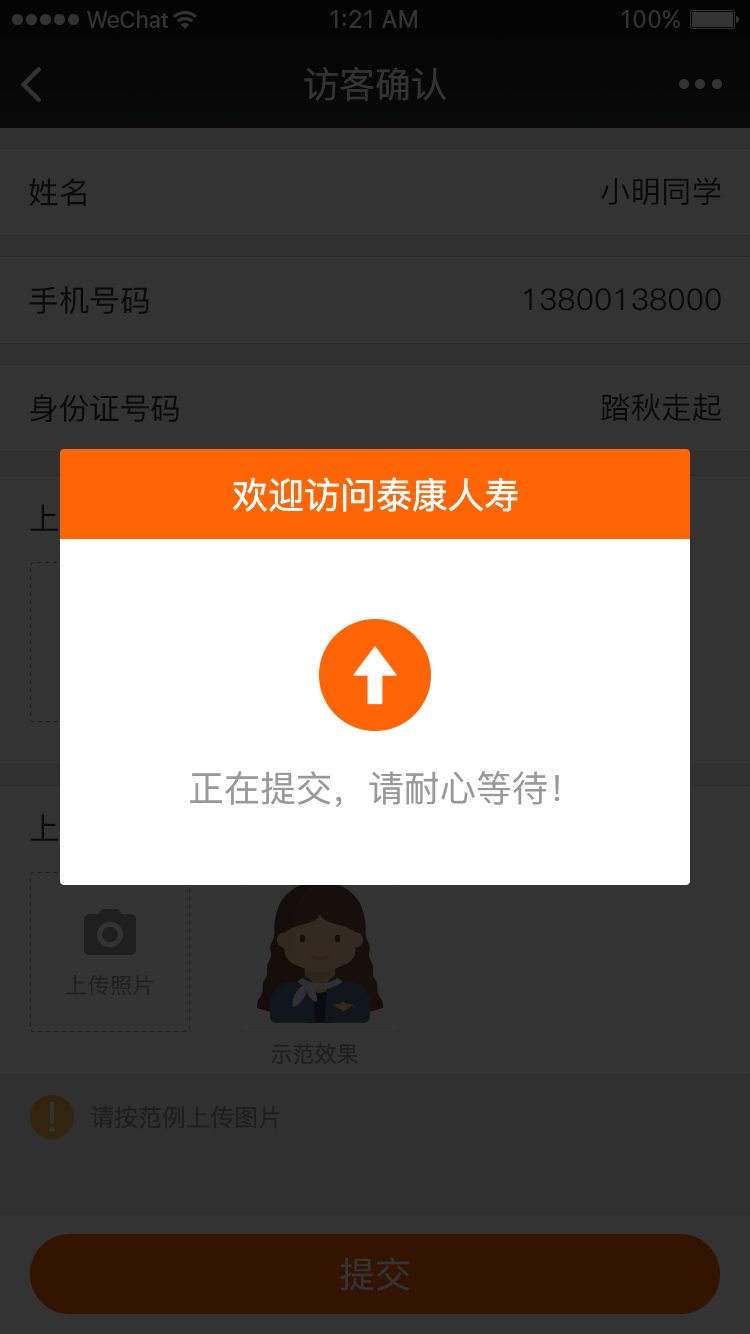
<style>
.page{position:relative;width:750px;height:1334px;background:#333333}
.page>*{position:absolute;margin:0}
.t1{font:36px "PingFang-SC-Medium";color:#333333}
.t2{font:30px "PingFangSC-Regular";color:#0a0a0a}
.t3{font:30px "PingFang-SC-Medium";color:#0a0a0a}
.t4{font:36px "PingFangSC-Regular";color:#ffffff}
.t5{font:36px "PingFang-SC-Medium";color:#999999}
.t6{font:22px "PingFang-SC-Medium";color:#1f1f1f}
.t7{font:22px "PingFangSC-Light";color:#1f1f1f}
.t8{font:24px "PingFangSC-Light";color:#1f1f1f}
</style>
<div class="page">
<p class="t1" style="left:304px;top:67px;width:142px;height:34px">访客确认</p>
<p class="t2" style="left:29px;top:178px;width:57px;height:28px">姓名</p>
<p class="t3" style="left:601px;top:177px;width:120px;height:28px">小明同学</p>
<p class="t2" style="left:29px;top:286px;width:120px;height:28px">手机号码</p>
<p class="t3" style="left:524px;top:288px;width:197px;height:23px">13800138000</p>
<p class="t2" style="left:30px;top:394px;width:149px;height:28px">身份证号码</p>
<p class="t3" style="left:601px;top:393px;width:120px;height:28px">踏秋走起</p>
<p class="t4" style="left:233px;top:477px;width:285px;height:35px">欢迎访问泰康人寿</p>
<p class="t5" style="left:190px;top:771px;width:370px;height:37px">正在提交，请耐心等待！</p>
<p class="t6" style="left:66px;top:974px;width:88px;height:22px">上传照片</p>
<p class="t7" style="left:271px;top:1043px;width:87px;height:22px">示范效果</p>
<p class="t8" style="left:90px;top:1105px;width:190px;height:24px">请按范例上传图片</p>
<p class="t1" style="left:340px;top:1257px;width:70px;height:34px">提交</p>
</div>
